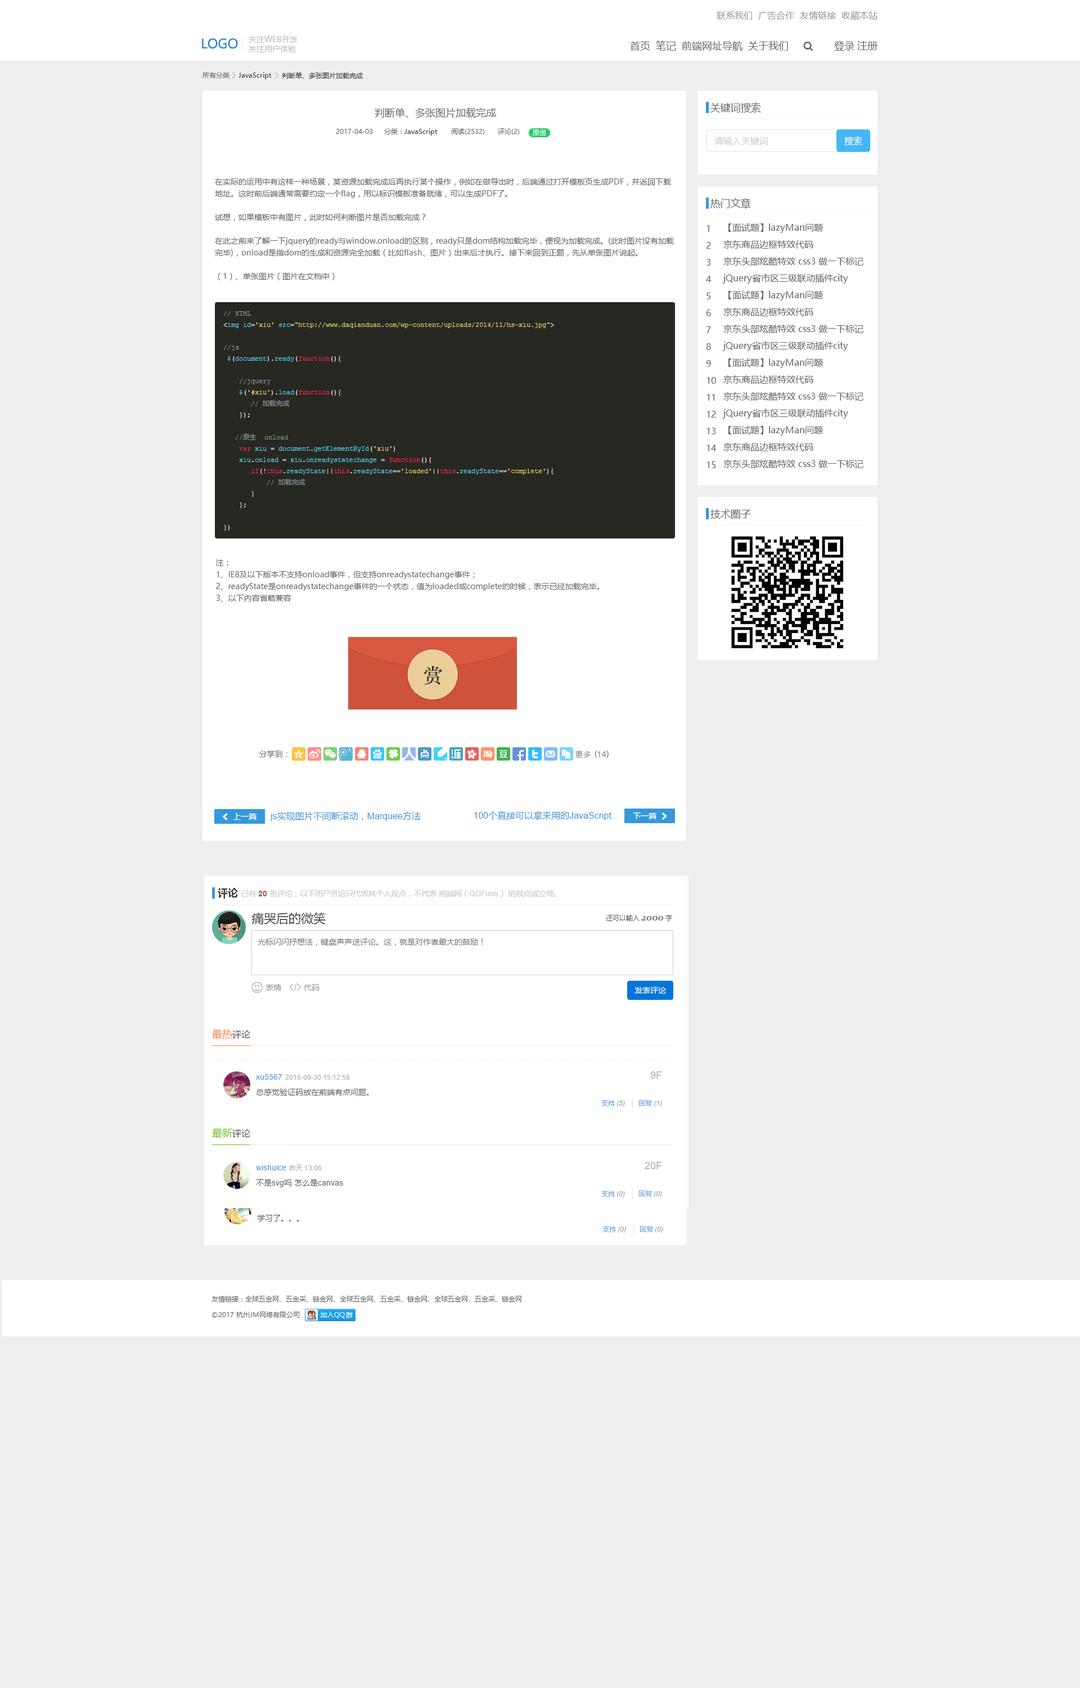
<style>
.page{position:relative;width:1080px;height:1688px;background:#eeeeee}
.page>*{position:absolute;margin:0}
.t1{font:9px "MicrosoftYaHei";color:#999999}
.t2{font:13px "MicrosoftYaHei";color:#1a7cd0}
.t3{font:7.9px "MicrosoftYaHei";color:#bbbbbb}
.t4{font:10.1px "MicrosoftYaHei";color:#666666}
.t5{font:6.8px "MicrosoftYaHei";color:#666666}
.t6{font:6.8px "MicrosoftYaHei";color:#333333}
.t7{font:6.8px "MicrosoftYaHei";color:#fefefe}
.t8{font:9px "MicrosoftYaHei";color:#cccccc}
.t9{font:9px "MicrosoftYaHei";color:#ffffff}
.t10{font:7.9px/11.8px "MicrosoftYaHei";color:#666666}
.t11{font:9px/16.9px "MicrosoftYaHei";color:#666666}
</style>
<div class="page">
<p class="t1" style="left:717px;top:11px;width:161px;height:9px">联系我们  广告合作  友情链接  收藏本站</p>
<p class="t2" style="left:202px;top:38px;width:36px;height:11px">LOGO</p>
<p class="t3" style="left:249px;top:36px;width:49px;height:16px">关注WEB开发 <br>关注用户体验</p>
<p class="t4" style="left:630px;top:40px;width:158px;height:11px">首页  笔记  前端网址导航  关于我们</p>
<p class="t4" style="left:834px;top:41px;width:44px;height:10px">登录 注册</p>
<p class="t5" style="left:202px;top:72px;width:28px;height:6px">所有分类</p>
<p class="t6" style="left:238px;top:72px;width:34px;height:7px">JavaScript</p>
<p class="t6" style="left:282px;top:72px;width:81px;height:7px">判断单、多张图片加载完成</p>
<p class="t4" style="left:375px;top:108px;width:121px;height:10px">判断单、多张图片加载完成</p>
<p class="t4" style="left:710px;top:102px;width:51px;height:10px">关键词搜索</p>
<p class="t5" style="left:336px;top:128px;width:184px;height:8px">2017-04-03     分类：<span class="t6">JavaScript</span>      阅读(2532) 评论(2)</p>
<p class="t7" style="left:533px;top:129px;width:13px;height:7px">原创</p>
<p class="t8" style="left:714px;top:137px;width:54px;height:8px">请输入关键词</p>
<p class="t9" style="left:844px;top:136px;width:18px;height:9px">搜索</p>
<p class="t10" style="left:215px;top:178px;width:459px;height:102px">在实际的运用中有这样一种场景，某资源加载完成后再执行某个操作，例如在做导出时，后端通过打开模板页生成PDF，并返回下载<br>地址。这时前后端通常需要约定一个flag，用以标识模板准备就绪，可以生成PDF了。<br><br>试想，如果模板中有图片，此时如何判断图片是否加载完成？<br><br>在此之前来了解一下jquery的ready与window.onload的区别，ready只是dom结构加载完毕，便视为加载完成。(此时图片没有加载<br>完毕)，onload是指dom的生成和资源完全加载（比如flash、图片）出来后才执行。接下来回到正题，先从单张图片说起。<br><br>（1）、单张图片（图片在文档中）</p>
<p class="t4" style="left:710px;top:198px;width:41px;height:11px">热门文章</p>
<p class="t11" style="left:706px;top:225px;width:11px;height:243px">1<br>2<br>3<br>4<br>5<br>6<br>7<br>8<br>9<br>10<br>11<br>12<br>13<br>14<br>15</p>
<p class="t11" style="left:722px;top:223px;width:141px;height:245px">【面试题】lazyMan问题<br>京东商品边框特效代码<br>京东头部炫酷特效 css3 做一下标记<br>jQuery省市区三级联动插件city<br>【面试题】lazyMan问题<br>京东商品边框特效代码<br>京东头部炫酷特效 css3 做一下标记<br>jQuery省市区三级联动插件city<br>【面试题】lazyMan问题<br>京东商品边框特效代码<br>京东头部炫酷特效 css3 做一下标记<br>jQuery省市区三级联动插件city<br>【面试题】lazyMan问题<br>京东商品边框特效代码<br>京东头部炫酷特效 css3 做一下标记</p>
<p class="t4" style="left:710px;top:509px;width:41px;height:10px">技术圈子</p>
<p class="t10" style="left:216px;top:559px;width:384px;height:43px">注：<br>1、IE8及以下版本不支持onload事件，但支持onreadystatechange事件；<br>2、readyState是onreadystatechange事件的一个状态，值为loaded或complete的时候，表示已经加载完毕。<br>3、以下内容省略兼容</p>
<p class="t5" style="left:212px;top:1295px;width:309px;height:7px">友情链接：全球五金网、五金采、链金网、全球五金网、五金采、链金网、全球五金网、五金采、链金网</p>
<p class="t5" style="left:212px;top:1311px;width:87px;height:6px">©2017 杭州JM网络有限公司</p>
</div>
